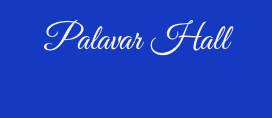
<style>
.page{position:relative;width:272px;height:118px;background:#1539c0}
.page>*{position:absolute;margin:0}
.t1{font:36px "GreatVibes-Regular";color:#f2f2f7}
</style>
<div class="page">
<p class="t1" style="left:44px;top:19px;width:190px;height:37px">Palavar Hall</p>
</div>
